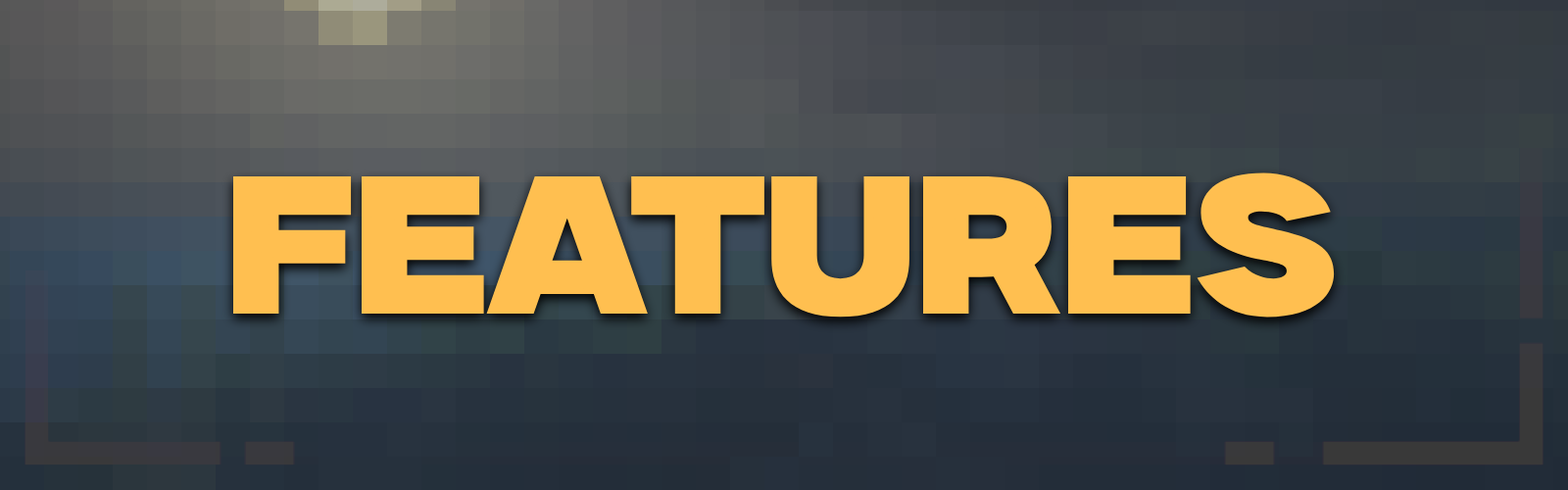
<style>
.page{position:relative;width:1568px;height:490px}
.page>*{position:absolute;margin:0}
.t1{font:196px "MilkerRegular";color:#ffbf50}
</style>
<div class="page">
<p class="t1" style="left:233px;top:172px;width:1102px;height:146px">FEATURES</p>
</div>
